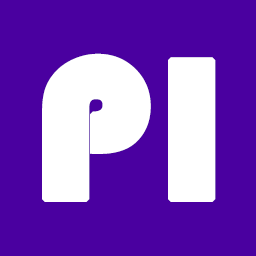
<style>
.page{position:relative;width:256px;height:256px;background:#4a00a0}
.page>*{position:absolute;margin:0}
.t1{font:208.3px "Bauhaus93";color:#ffffff;font-weight:bold}
</style>
<div class="page">
<p class="t1" style="left:42px;top:53px;width:174px;height:149px">PI</p>
</div>
